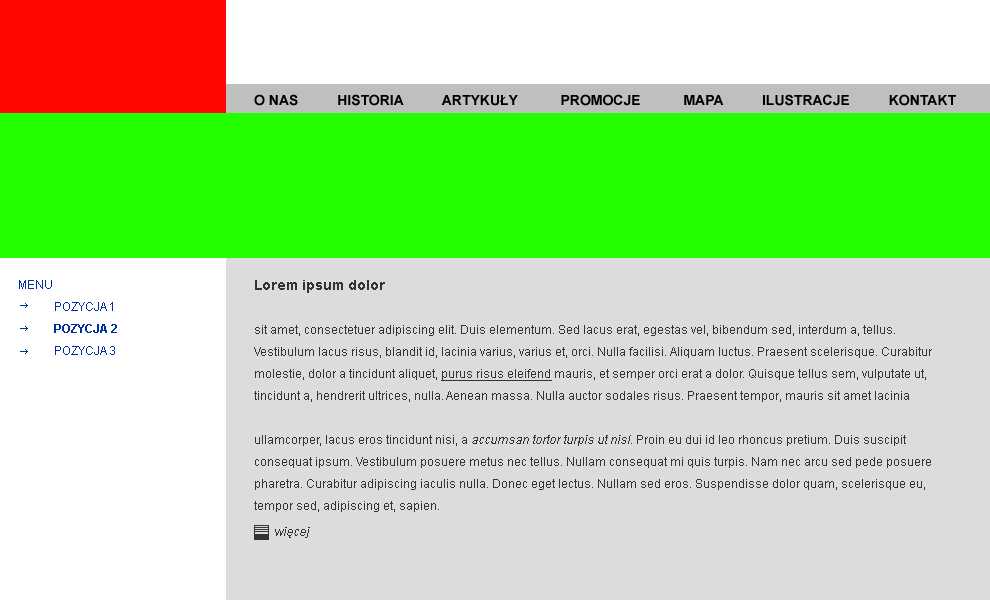
<style>
.page{position:relative;width:990px;height:600px;background:#dcdcdc}
.page>*{position:absolute;margin:0}
.t1{font:14px "Arial-BoldMT";color:#000000;text-transform:uppercase}
.t2{font:12px/22px "ArialMT";color:#00309e;text-transform:uppercase}
.t3{font:12px/22px "Arial-BoldMT";color:#00309e;text-transform:uppercase}
.t4{font:12px/22px "ArialMT";color:#343434}
.t5{font:14px/22px "Arial-BoldMT";color:#343434}
.t6{font:12px/22px "ArialMT";color:#343434;text-decoration:underline}
.t7{font:12px/22px "ArialMT";color:#343434;font-style:italic}
.t8{font:12px "ArialMT";color:#343434;font-style:italic}
</style>
<div class="page">
<p class="t1" style="left:254px;top:94px;width:702px;height:12px">O nas          Historia          Artykuły           ProMocje           Mapa          Ilustracje          Kontakt</p>
<p class="t2" style="left:19px;top:280px;width:98px;height:75px">Menu<br> pozycja 1<br><span class="t3"> pozycja 2<br></span> pozycja 3</p>
<p class="t4" style="left:254px;top:280px;width:678px;height:232px"><span class="t5">Lorem ipsum dolor <br></span><br>sit amet, consectetuer adipiscing elit. Duis elementum. Sed lacus erat, egestas vel, bibendum sed, interdum a, tellus. Vestibulum lacus risus, blandit id, lacinia varius, varius et, orci. Nulla facilisi. Aliquam luctus. Praesent scelerisque. Curabitur molestie, dolor a tincidunt aliquet, <span class="t6">purus risus eleifend</span> mauris, et semper orci erat a dolor. Quisque tellus sem, vulputate ut, tincidunt a, hendrerit ultrices, nulla. Aenean massa. Nulla auctor sodales risus. Praesent tempor, mauris sit amet lacinia <br><br>ullamcorper, lacus eros tincidunt nisi, a <span class="t7">accumsan tortor turpis ut nisl. </span>Proin eu dui id leo rhoncus pretium. Duis suscipit consequat ipsum. Vestibulum posuere metus nec tellus. Nullam consequat mi quis turpis. Nam nec arcu sed pede posuere pharetra. Curabitur adipiscing iaculis nulla. Donec eget lectus. Nullam sed eros. Suspendisse dolor quam, scelerisque eu, tempor sed, adipiscing et, sapien.</p>
<p class="t8" style="left:275px;top:527px;width:35px;height:11px">więcej</p>
</div>
